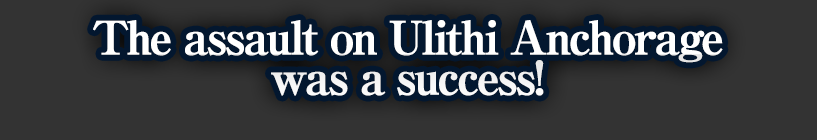
<style>
.page{position:relative;width:817px;height:140px;background:#333333}
.page>*{position:absolute;margin:0}
.t1{font:46px/40px "RyuminPro-ExBold";letter-spacing:-0.08em;color:#ffffff;font-weight:bold}
</style>
<div class="page">
<p class="t1" style="left:93px;top:20px;width:630px;height:76px;text-align:center">The assault on Ulithi Anchorage<br>was a success!</p>
</div>
